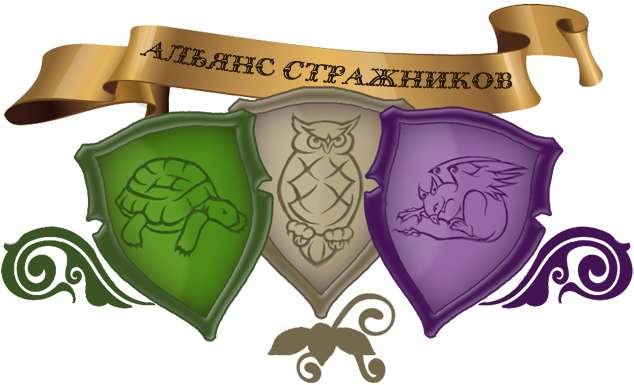
<style>
.page{position:relative;width:634px;height:385px;background:#ffffff}
.page>*{position:absolute;margin:0}
.t1{font:27px "BodoniInitials";color:#221703;font-style:italic}
</style>
<div class="page">
<p class="t1" style="left:140px;top:41px;width:135px;height:35px;rotate:9deg">Альянс</p>
<p class="t1" style="left:283px;top:61px;width:229px;height:29px;rotate:3deg">стражников</p>
</div>
